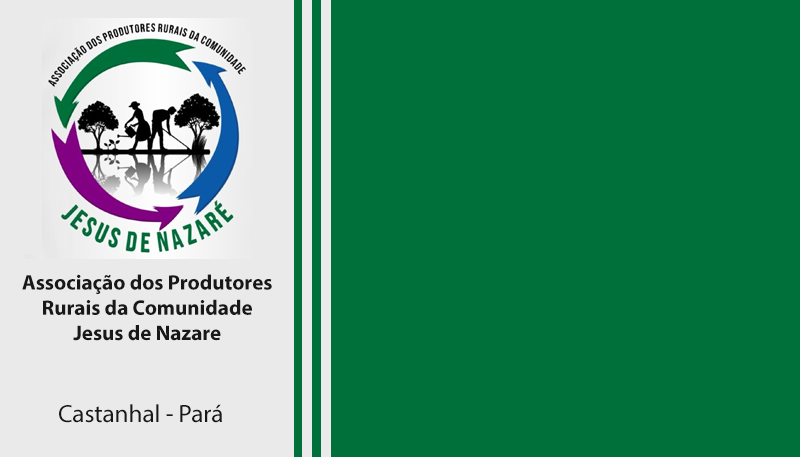
<style>
.page{position:relative;width:800px;height:457px;background:#00703a}
.page>*{position:absolute;margin:0}
.t1{font:21px "MyriadPro-Bold";color:#181818}
.t2{font:25px "MyriadPro-Regular";color:#181818}
</style>
<div class="page">
<p class="t1" style="left:22px;top:274px;width:250px;height:67px;text-align:center">Associação dos Produtores<br>Rurais da Comunidade<br>Jesus de Nazare</p>
<p class="t2" style="left:59px;top:404px;width:163px;height:19px">Castanhal - Pará</p>
</div>
